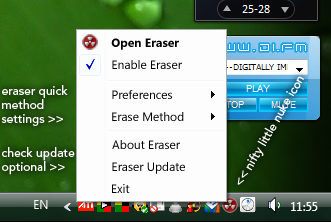
<style>
.page{position:relative;width:331px;height:222px;background:#fdfdfd}
.page>*{position:absolute;margin:0}
.t1{font:12px "SegoeUI-Bold";color:#000000}
.t2{font:12px "SegoeUI";color:#000000}
.t3{font:12px "AvenirLTStd-Medium";color:#ffffff}
</style>
<div class="page">
<p class="t1" style="left:111px;top:38px;width:68px;height:12px">Open Eraser</p>
<p class="t2" style="left:112px;top:60px;width:70px;height:9px">Enable Eraser</p>
<p class="t3" style="left:237px;top:76px;width:67px;height:109px;rotate:-60deg">&lt;&lt; nifty little nuke icon</p>
<p class="t3" style="left:1px;top:85px;width:67px;height:41px">eraser quick<br>method <br>settings &gt;&gt;</p>
<p class="t2" style="left:112px;top:90px;width:60px;height:9px">Preferences</p>
<p class="t2" style="left:112px;top:112px;width:72px;height:9px">Erase Method</p>
<p class="t3" style="left:2px;top:147px;width:73px;height:28px">check update<br>optional &gt;&gt;</p>
<p class="t2" style="left:112px;top:140px;width:68px;height:9px">About Eraser</p>
<p class="t2" style="left:112px;top:162px;width:73px;height:12px">Eraser Update</p>
<p class="t2" style="left:112px;top:184px;width:18px;height:9px">Exit</p>
</div>
